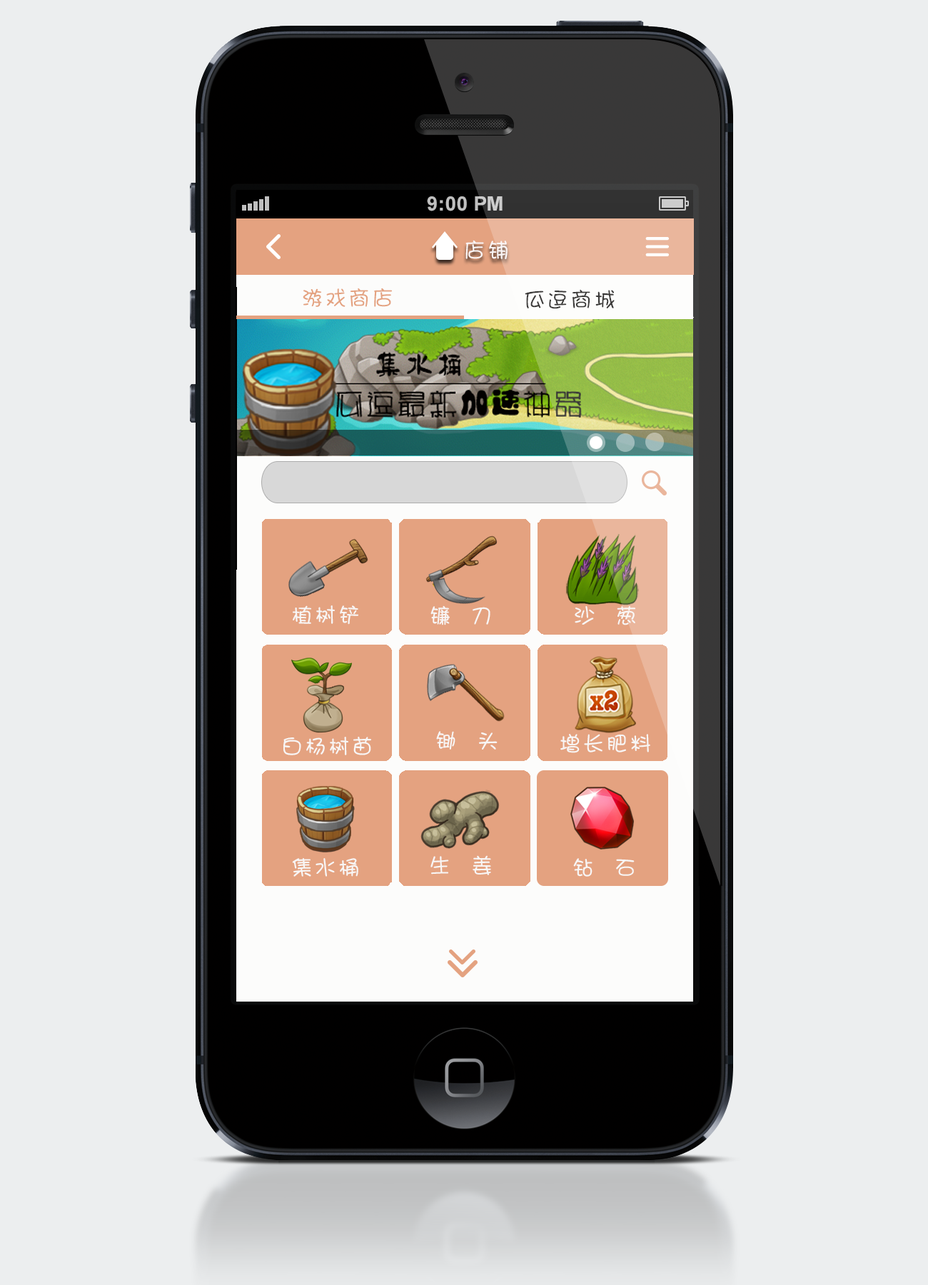
<style>
.page{position:relative;width:928px;height:1285px;background:#eceeef}
.page>*{position:absolute;margin:0}
.t1{font:21.4px "DFPShaoNvW5";letter-spacing:0.1em;color:#faf5f5}
.t2{font:21.4px "DFPShaoNvW5";letter-spacing:0.1em;color:#e4a280}
.t3{font:21.4px "DFPShaoNvW5";letter-spacing:0.1em;color:#3a3938}
.t4{font:21.4px "DFPShaoNvW5";letter-spacing:0.1em;color:#f8f6f5}
</style>
<div class="page">
<p class="t1" style="left:465px;top:240px;width:43px;height:19px">店铺</p>
<p class="t2" style="left:303px;top:288px;width:89px;height:19px">游戏商店</p>
<p class="t3" style="left:525px;top:289px;width:90px;height:20px">瓜逗商城</p>
<p class="t4" style="left:293px;top:605px;width:65px;height:20px">植树铲</p>
<p class="t4" style="left:430px;top:605px;width:60px;height:20px">镰  刀</p>
<p class="t4" style="left:575px;top:606px;width:60px;height:19px">沙  葱</p>
<p class="t4" style="left:283px;top:737px;width:88px;height:18px">白杨树苗</p>
<p class="t4" style="left:436px;top:731px;width:62px;height:19px">锄  头</p>
<p class="t4" style="left:560px;top:734px;width:90px;height:19px">增长肥料</p>
<p class="t4" style="left:430px;top:855px;width:61px;height:20px">生  姜</p>
<p class="t4" style="left:292px;top:858px;width:66px;height:19px">集水桶</p>
<p class="t4" style="left:573px;top:858px;width:62px;height:19px">钻  石</p>
</div>
